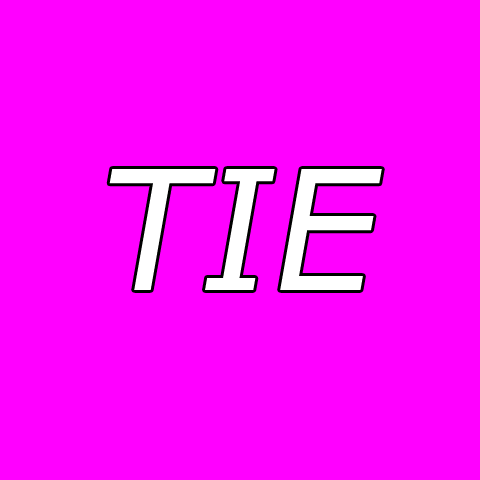
<style>
.page{position:relative;width:480px;height:480px;background:#ff00ff}
.page>*{position:absolute;margin:0}
.t1{font:166.7px "MSReferenceSansSerif";color:#ffffff;font-style:italic}
</style>
<div class="page">
<p class="t1" style="left:109px;top:169px;width:273px;height:121px">TIE</p>
</div>
